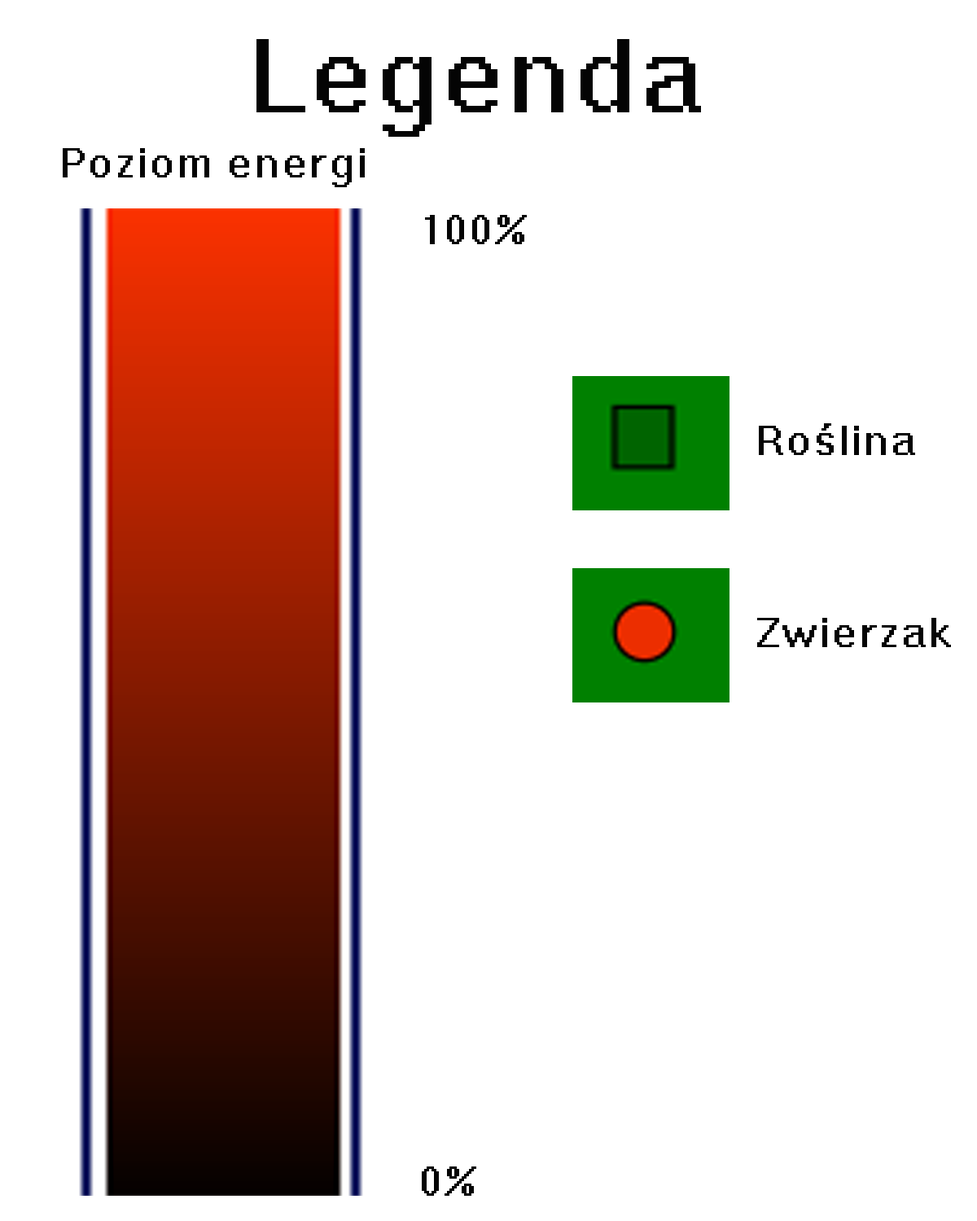
<style>
.page{position:relative;width:977px;height:1221px;background:#ffffff}
.page>*{position:absolute;margin:0}
.t1{font:97.7px "System";letter-spacing:0.05em;color:#040404}
.t2{font:40.7px "System";letter-spacing:0.05em;color:#040404}
</style>
<div class="page">
<p class="t1" style="left:256px;top:39px;width:445px;height:98px">Legenda</p>
<p class="t2" style="left:63px;top:148px;width:302px;height:39px">Poziom energi</p>
<p class="t2" style="left:425px;top:215px;width:102px;height:29px">100%</p>
<p class="t2" style="left:759px;top:423px;width:156px;height:32px">Roślina</p>
<p class="t2" style="left:757px;top:618px;width:194px;height:29px">Zwierzak</p>
<p class="t2" style="left:422px;top:1166px;width:54px;height:30px">0%</p>
</div>
